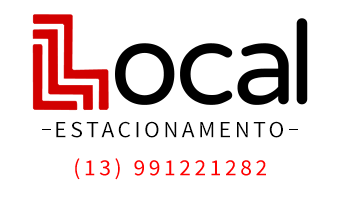
<style>
.page{position:relative;width:340px;height:200px;background:#ffffff}
.page>*{position:absolute;margin:0}
.t1{font:23.2px "SourceSansPro-Regular";letter-spacing:0.15em;color:#000000}
.t2{font:23.2px "SourceSansPro-Regular";letter-spacing:0.15em;color:#ff0101}
</style>
<div class="page">
<p class="t1" style="left:56px;top:121px;width:227px;height:17px">ESTACIONAMENTO</p>
<p class="t2" style="left:75px;top:158px;width:191px;height:22px">(13) 991221282</p>
</div>
